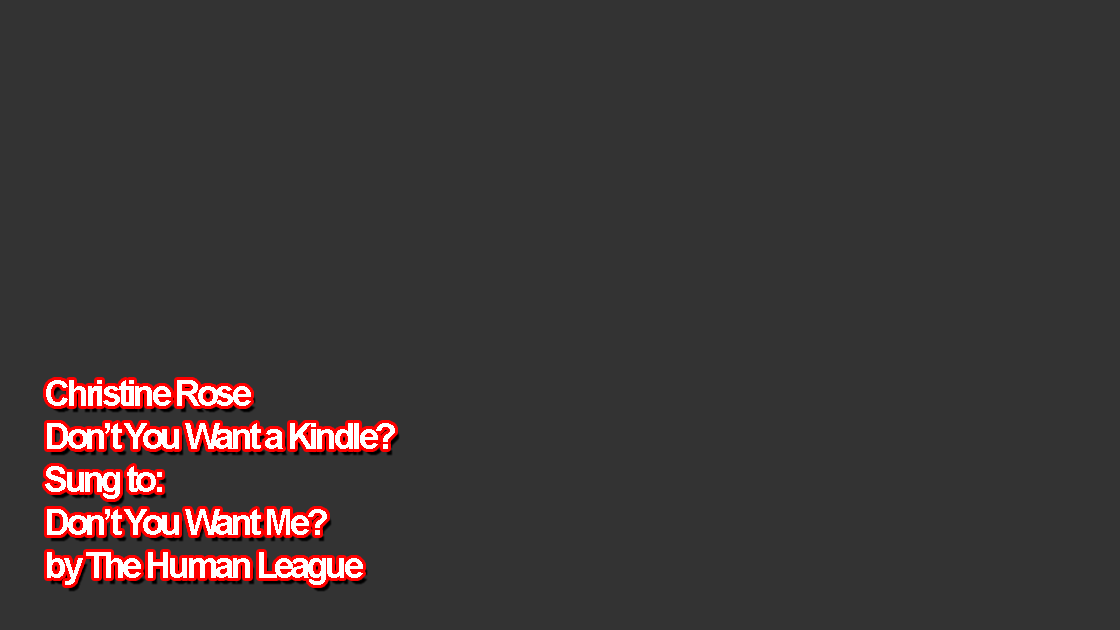
<style>
.page{position:relative;width:1120px;height:630px;background:#333333}
.page>*{position:absolute;margin:0}
.t1{font:35.9px "Arial-BoldMT";letter-spacing:-0.1em;color:#ffffff}
</style>
<div class="page">
<p class="t1" style="left:45px;top:380px;width:350px;height:205px">Christine Rose<br>Don’t You Want a Kindle?<br>Sung to:<br>Don’t You Want Me?<br>by The Human League</p>
</div>
